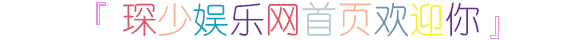
<style>
.page{position:relative;width:570px;height:40px;background:#ffffff}
.page>*{position:absolute;margin:0}
.t1{font:36px "YouYuan";color:#f38aef}
.t2{font:36px "YouYuan";color:#df5164}
.t3{font:36px "YouYuan";color:#e714e0}
.t4{font:36px "YouYuan";color:#f8b293}
.t5{font:36px "YouYuan";color:#15a2c0}
.t6{font:36px "YouYuan";color:#662e91}
.t7{font:36px "YouYuan";color:#b5cad3}
.t8{font:36px "YouYuan";color:#6b95a8}
.t9{font:36px "YouYuan";color:#fdee21}
</style>
<div class="page">
<p class="t1" style="left:96px;top:2px;width:10px;height:23px">『</p>
<p class="t2" style="left:122px;top:2px;width:357px;height:35px"><span class="t3">  </span>琛<span class="t4">少</span><span class="t5">娱</span><span class="t6">乐</span>网<span class="t7">首</span><span class="t4">页</span><span class="t8">欢</span><span class="t9">迎</span><span class="t6">你</span></p>
<p class="t1" style="left:490px;top:16px;width:9px;height:23px">』</p>
</div>
